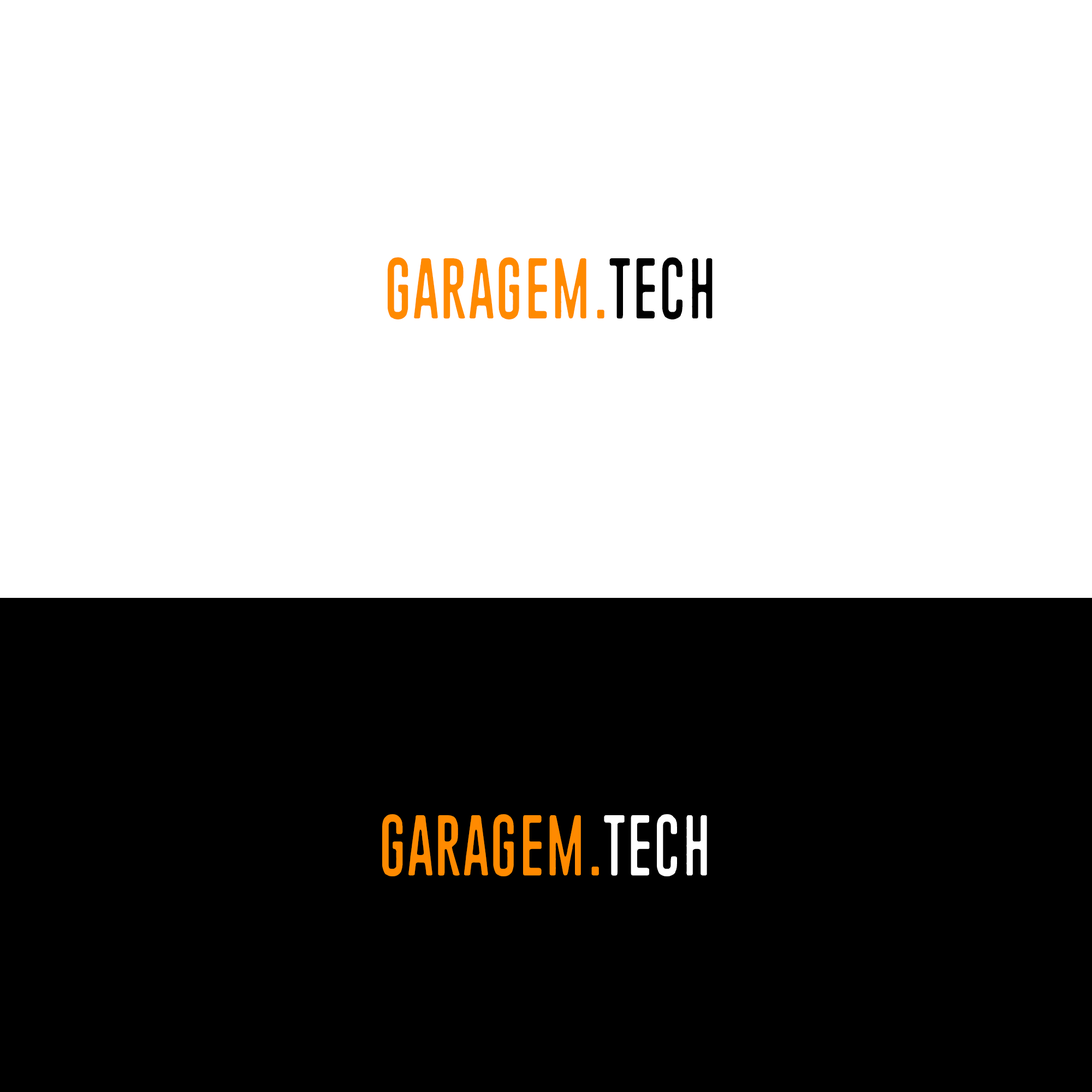
<style>
.page{position:relative;width:1092px;height:1092px;background:#ffffff}
.page>*{position:absolute;margin:0}
.t1{font:85.9px "Piparivahtiperhonen";letter-spacing:0.005em;color:#ff8a00}
.t2{font:85.9px "Piparivahtiperhonen";letter-spacing:0.005em;color:#000000}
.t3{font:85.9px "Piparivahtiperhonen";letter-spacing:0.005em;color:#ffffff}
</style>
<div class="page">
<p class="t1" style="left:388px;top:257px;width:325px;height:62px">GARAGEM.<span class="t2">TECH</span></p>
<p class="t1" style="left:382px;top:814px;width:325px;height:62px">GARAGEM.<span class="t3">TECH</span></p>
</div>
